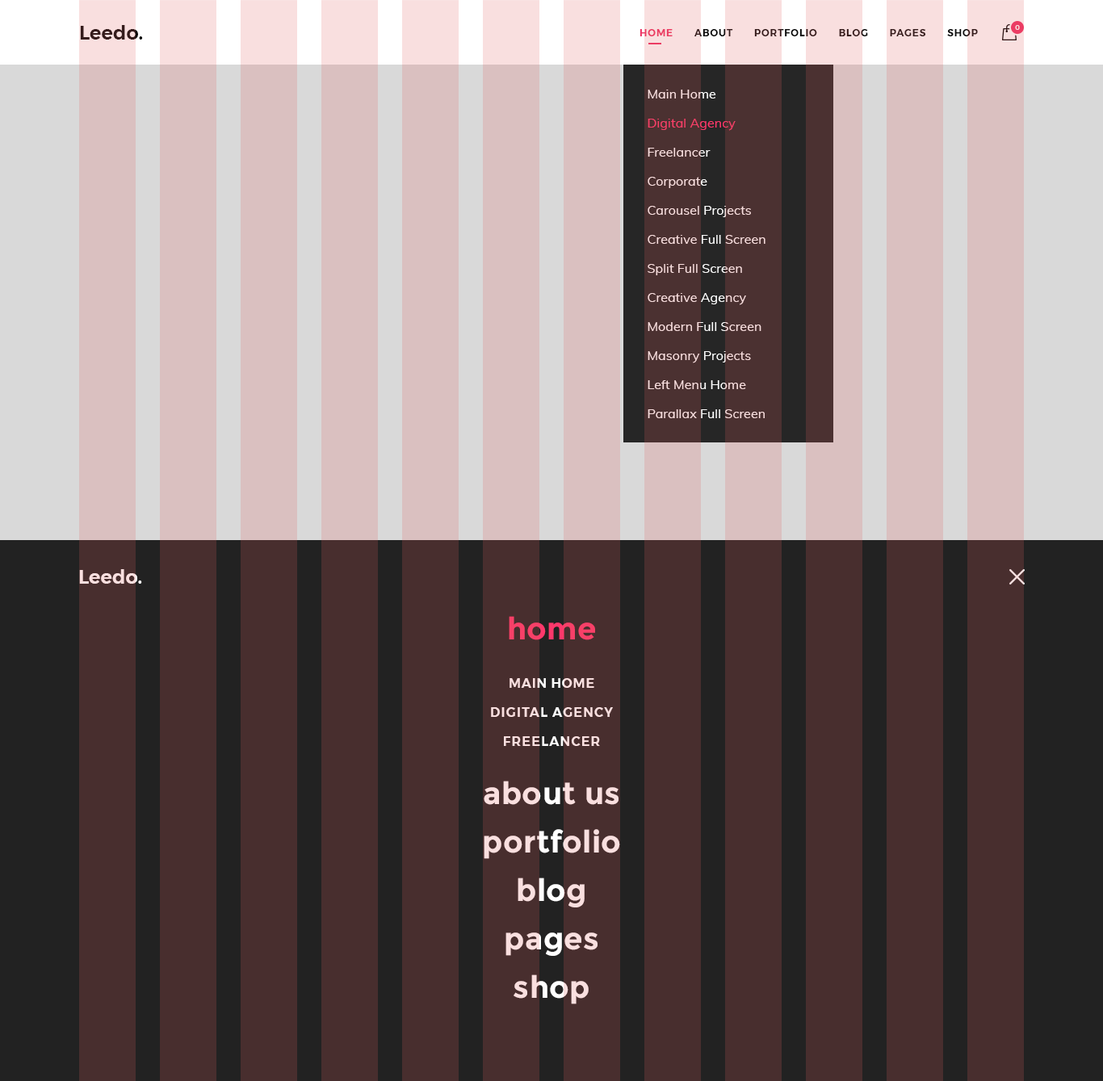
<style>
.page{position:relative;width:1103px;height:1081px;background:#482e2e}
.page>*{position:absolute;margin:0}
.t1{font:19.4px "Montserrat-SemiBold";color:#351c1c}
.t2{font:9.7px "Montserrat-SemiBold";letter-spacing:0.075em;text-transform:uppercase}
.t3{font:6.5px "Montserrat-Medium";letter-spacing:0.05em;color:#f9dfdf;text-transform:uppercase}
.t4{font:12.9px/29.1px "Muli-Regular";letter-spacing:0.005em;color:#f9dfdf}
.t5{font:19.4px "Montserrat-SemiBold";color:#f9dfdf}
.t6{font:12.9px/29.1px "Montserrat-SemiBold";letter-spacing:0.075em;text-transform:uppercase}
.t7{font:30.7px/48.4px "Montserrat-Bold";letter-spacing:0.01em}
.t8{font:12.9px/48.4px "Montserrat-SemiBold";letter-spacing:0.05em;text-transform:uppercase}
.t9{font:30.7px/58.1px "Montserrat-Bold";letter-spacing:0.01em}
</style>
<div class="page">
<p class="t1" style="left:80px;top:25px;width:63px;height:15px">Leedo.</p>
<p class="t2" style="left:639px;top:29px;width:339px;height:7px">Home       About       portfolio       blog       pages       shop</p>
<p class="t3" style="left:1015px;top:25px;width:5px;height:5px">0</p>
<p class="t4" style="left:648px;top:90px;width:117px;height:328px">Main Home<br>Digital Agency<br>Freelancer<br>Corporate<br>Carousel Projects<br>Creative Full Screen<br>Split Full Screen<br>Creative Agency<br>Modern Full Screen<br>Masonry Projects<br>Left Menu Home<br>Parallax Full Screen</p>
<p class="t5" style="left:79px;top:569px;width:63px;height:15px">Leedo.</p>
<p class="t6" style="left:484px;top:616px;width:136px;height:388px;text-align:center"><span class="t7">home<br></span><span class="t8">Main Home<br></span>Digital Agency<br>Freelancer<br><span class="t9">about us<br></span><span class="t7">portfolio<br>blog<br>pages<br>shop</span></p>
</div>
